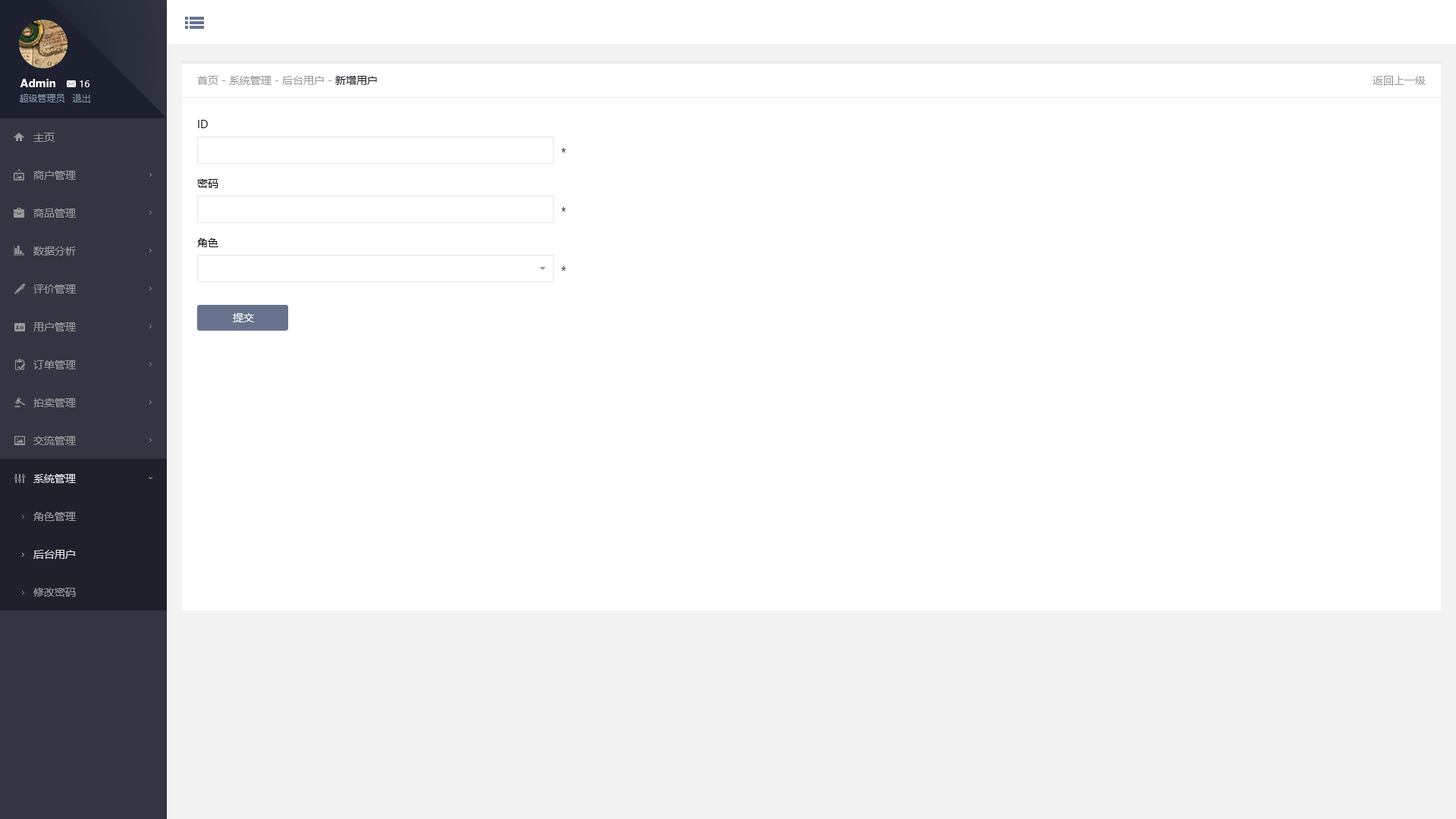
<style>
.page{position:relative;width:1456px;height:819px;background:#ffffff}
.page>*{position:absolute;margin:0}
.t1{font:10.6px "MicrosoftYaHei";color:#999999}
.t2{font:10.6px "MicrosoftYaHei";color:#1f212a}
.t3{font:10.6px "MicrosoftYaHei-Bold";color:#ffffff}
.t4{font:9.1px "MicrosoftYaHei";color:#ffffff}
.t5{font:9.1px "MicrosoftYaHei";color:#8095a8}
.t6{font:10.6px/59.1px "MicrosoftYaHei";color:#000000}
.t7{font:10.6px/37.9px "MicrosoftYaHei";color:#999999}
.t8{font:10.6px/37.9px "MicrosoftYaHei";color:#e5e5e5}
.t9{font:10.6px "MicrosoftYaHei";color:#ffffff}
.t10{font:10.6px/37.9px "MicrosoftYaHei";color:#e6e6e6}
</style>
<div class="page">
<p class="t1" style="left:197px;top:76px;width:180px;height:9px">首页 - 系统管理 - 后台用户 - <span class="t2">新增用户</span></p>
<p class="t1" style="left:1373px;top:76px;width:53px;height:10px">返回上一级</p>
<p class="t3" style="left:20px;top:79px;width:35px;height:8px">Admin</p>
<p class="t4" style="left:80px;top:80px;width:9px;height:7px">16</p>
<p class="t5" style="left:20px;top:94px;width:45px;height:8px">超级管理员</p>
<p class="t5" style="left:72px;top:94px;width:18px;height:9px">退出</p>
<p class="t6" style="left:197px;top:120px;width:21px;height:127px">ID<br>密码<br>角色</p>
<p class="t7" style="left:33px;top:133px;width:43px;height:350px">主页<br>商户管理<br>商品管理<br>数据分析<br>评价管理<br>用户管理<br>订单管理<br>拍卖管理<br>交流管理<br><span class="t8">系统管理</span></p>
<p class="t6" style="left:561px;top:148px;width:5px;height:123px">*<br>*<br>*</p>
<p class="t9" style="left:233px;top:313px;width:21px;height:9px">提交</p>
<p class="t7" style="left:33px;top:512px;width:43px;height:85px">角色管理<br><span class="t10">后台用户<br></span>修改密码</p>
</div>
